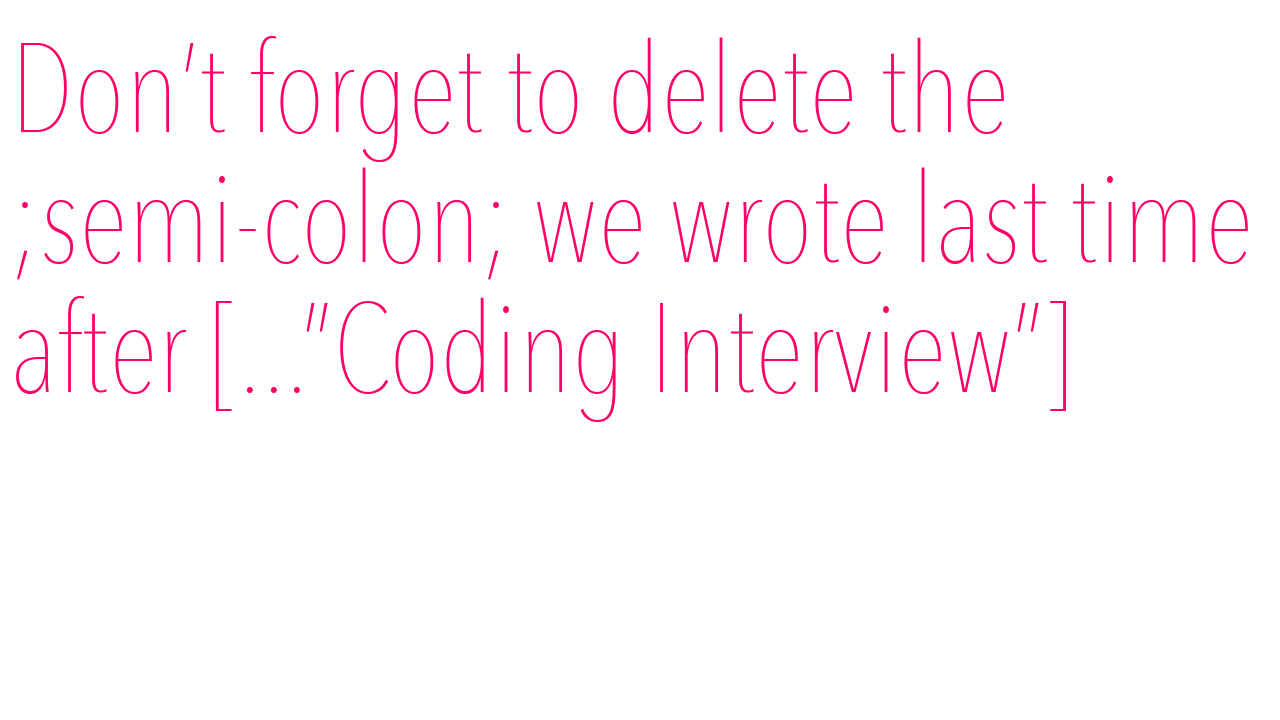
<style>
.page{position:relative;width:1280px;height:720px;background:#ffffff}
.page>*{position:absolute;margin:0}
.t1{font:125px "AvenirNextCondensed-UltraLight";color:#ff0066}
</style>
<div class="page">
<p class="t1" style="left:16px;top:36px;width:1232px;height:386px">Don’t forget to delete the<br>;semi-colon; we wrote last time <br>after [...”Coding Interview”]</p>
</div>
